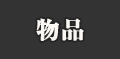
<style>
.page{position:relative;width:120px;height:59px;background:#333333}
.page>*{position:absolute;margin:0}
.t1{font:24px "RyuminPr6N-ExBold";color:#fbf8f3;font-weight:bold}
</style>
<div class="page">
<p class="t1" style="left:36px;top:18px;width:48px;height:23px">物品</p>
</div>
